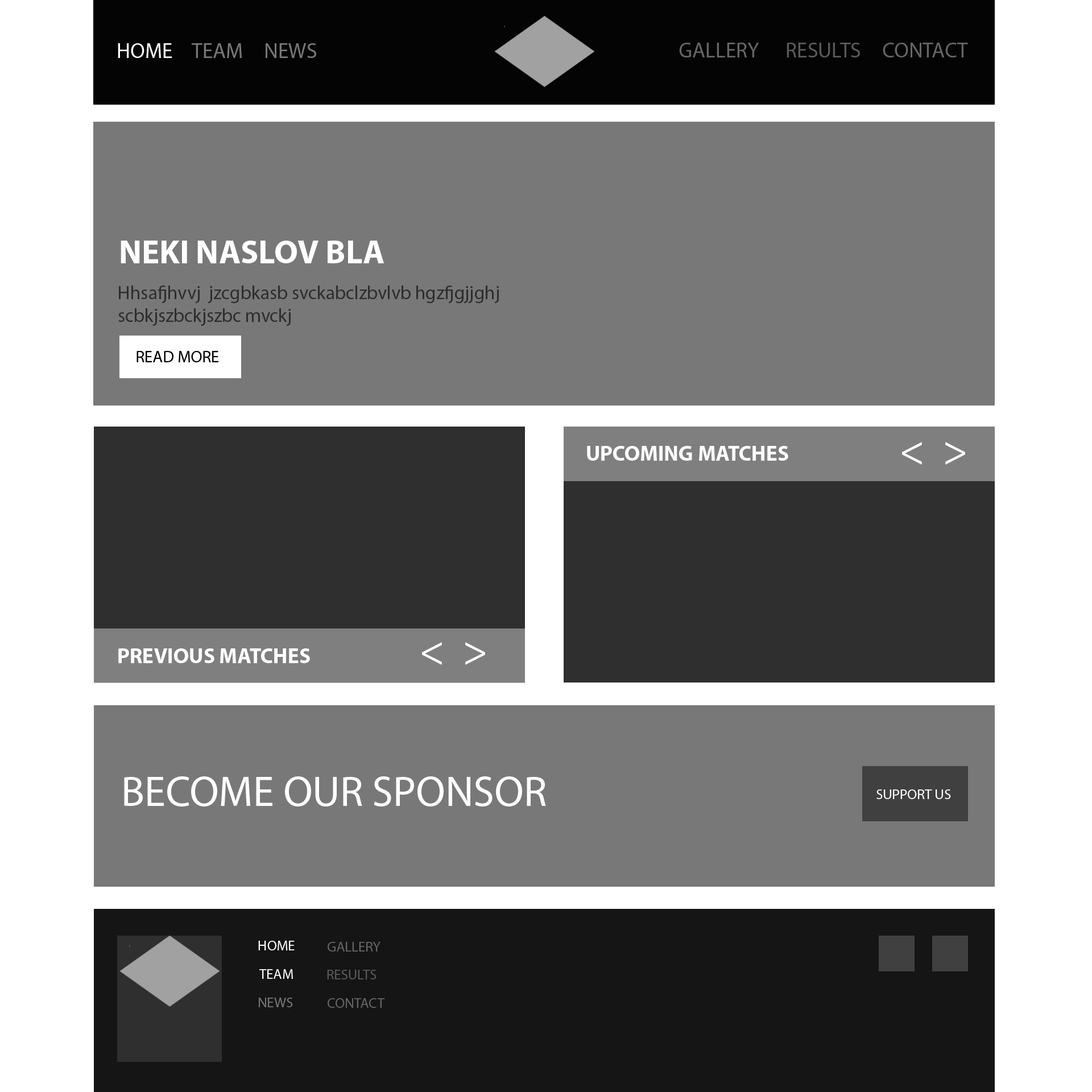
<style>
.page{position:relative;width:1092px;height:1092px;background:#787878}
.page>*{position:absolute;margin:0}
.t1{font:21.3px "MyriadPro-Regular";color:#ffffff}
.t2{font:21.3px "MyriadPro-Regular";color:#787878}
.t3{font:21.3px "MyriadPro-Regular";color:#666666}
.t4{font:21.3px "MyriadPro-Regular";color:#5a5a5a}
.t5{font:33.2px "MyriadPro-Bold";color:#ffffff}
.t6{font:19px "MyriadPro-Regular";color:#2e2e2e}
.t7{font:16.6px "MyriadPro-Regular";color:#000000}
.t8{font:21.3px "MyriadPro-Bold";color:#fefefe}
.t9{font:42.7px "MyriadPro-Regular";color:#ffffff}
.t10{font:21.3px "MyriadPro-Bold";color:#ffffff}
.t11{font:14.2px "MyriadPro-Regular";color:#ffffff}
.t12{font:14.2px "MyriadPro-Regular";color:#666666}
.t13{font:14.2px "MyriadPro-Regular";color:#5a5a5a}
.t14{font:14.2px "MyriadPro-Regular";color:#787878}
</style>
<div class="page">
<p class="t1" style="left:118px;top:43px;width:54px;height:15px">HOME</p>
<p class="t2" style="left:192px;top:43px;width:50px;height:15px">TEAM</p>
<p class="t2" style="left:266px;top:43px;width:50px;height:15px">NEWS</p>
<p class="t3" style="left:679px;top:43px;width:80px;height:14px">GALLERY</p>
<p class="t4" style="left:787px;top:43px;width:73px;height:14px">RESULTS</p>
<p class="t3" style="left:883px;top:43px;width:85px;height:14px">CONTACT</p>
<p class="t5" style="left:121px;top:241px;width:263px;height:22px">NEKI NASLOV BLA</p>
<p class="t6" style="left:118px;top:286px;width:381px;height:40px">Hhsafjhvvj  jzcgbkasb svckabclzbvlvb hgzfjgjjghj<br>scbkjszbckjszbc mvckj</p>
<p class="t7" style="left:136px;top:351px;width:82px;height:11px">READ MORE</p>
<p class="t8" style="left:587px;top:446px;width:201px;height:15px">UPCOMING MATCHES</p>
<p class="t9" style="left:902px;top:442px;width:63px;height:23px">&lt;  &gt;</p>
<p class="t10" style="left:118px;top:648px;width:192px;height:15px">PREVIOUS MATCHES</p>
<p class="t9" style="left:422px;top:642px;width:63px;height:23px">&lt;  &gt;</p>
<p class="t9" style="left:124px;top:776px;width:422px;height:30px">BECOME OUR SPONSOR</p>
<p class="t11" style="left:876px;top:789px;width:75px;height:10px">SUPPORT US</p>
<p class="t11" style="left:258px;top:941px;width:37px;height:9px">HOME</p>
<p class="t12" style="left:328px;top:942px;width:52px;height:10px">GALLERY</p>
<p class="t11" style="left:259px;top:969px;width:34px;height:10px">TEAM</p>
<p class="t13" style="left:327px;top:970px;width:50px;height:9px">RESULTS</p>
<p class="t14" style="left:259px;top:998px;width:34px;height:9px">NEWS</p>
<p class="t12" style="left:328px;top:998px;width:57px;height:10px">CONTACT</p>
</div>
